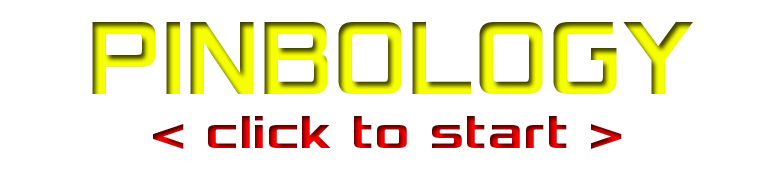
<style>
.page{position:relative;width:768px;height:169px;background:#ffffff}
.page>*{position:absolute;margin:0}
.t1{font:109.8px "Xolonium-Bold";scale:0.72 1}
.t2{font:48px "Xolonium-Bold"}
</style>
<div class="page">
<p class="t1" style="left:92px;top:22px;width:601px;height:72px">PINBOLOGY</p>
<p class="t2" style="left:153px;top:116px;width:469px;height:33px">&lt; click to start &gt;</p>
</div>
